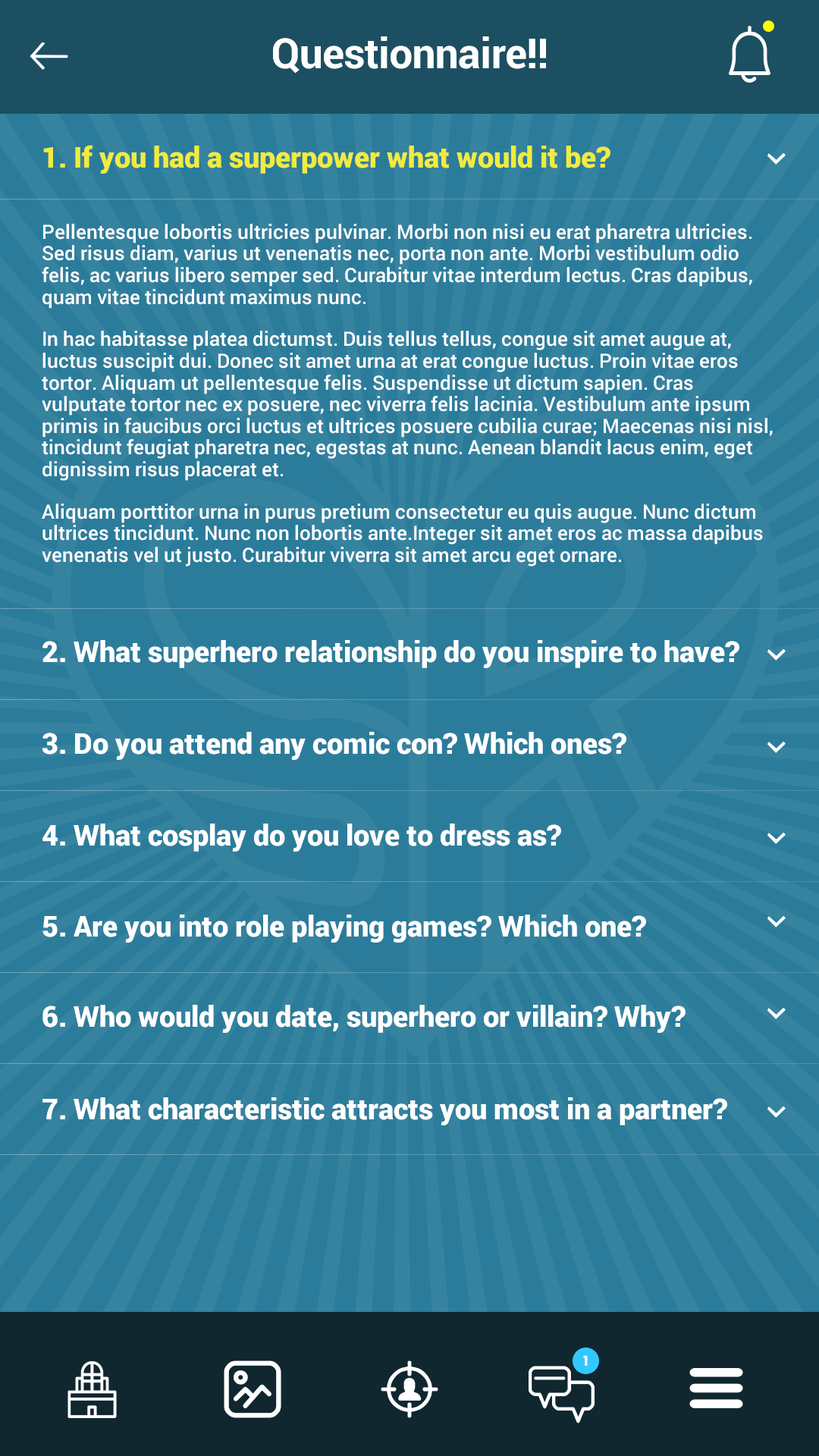
<style>
.page{position:relative;width:819px;height:1456px;background:#2b7c9b}
.page>*{position:absolute;margin:0}
.t1{font:41.7px "Roboto-Bold";letter-spacing:-0.013em;color:#ffffff}
.t2{font:28.8px "Roboto-Black";color:#f1eb40}
.t3{font:19.7px/21.7px "Roboto-Medium";color:#ffffff}
.t4{font:28.8px "Roboto-Black";color:#ffffff}
.t5{font:13.6px "Poppins-Bold";letter-spacing:-0.02em;color:#f6f6f6}
</style>
<div class="page">
<p class="t1" style="left:273px;top:36px;width:273px;height:38px">Questionnaire!!</p>
<p class="t2" style="left:43px;top:145px;width:567px;height:29px">1. If you had a superpower what would it be?</p>
<p class="t3" style="left:42px;top:224px;width:731px;height:342px">Pellentesque lobortis ultricies pulvinar. Morbi non nisi eu erat pharetra ultricies. Sed risus diam, varius ut venenatis nec, porta non ante. Morbi vestibulum odio felis, ac varius libero semper sed. Curabitur vitae interdum lectus. Cras dapibus, quam vitae tincidunt maximus nunc.<br><br><br>In hac habitasse platea dictumst. Duis tellus tellus, congue sit amet augue at, luctus suscipit dui. Donec sit amet urna at erat congue luctus. Proin vitae eros tortor. Aliquam ut pellentesque felis. Suspendisse ut dictum sapien. Cras vulputate tortor nec ex posuere, nec viverra felis lacinia. Vestibulum ante ipsum primis in faucibus orci luctus et ultrices posuere cubilia curae; Maecenas nisi nisl, tincidunt feugiat pharetra nec, egestas at nunc. Aenean blandit lacus enim, eget dignissim risus placerat et. <br><br><br>Aliquam porttitor urna in purus pretium consectetur eu quis augue. Nunc dictum ultrices tincidunt. Nunc non lobortis ante.Integer sit amet eros ac massa dapibus venenatis vel ut justo. Curabitur viverra sit amet arcu eget ornare.</p>
<p class="t4" style="left:42px;top:640px;width:697px;height:28px">2. What superhero relationship do you inspire to have?</p>
<p class="t4" style="left:42px;top:732px;width:584px;height:28px">3. Do you attend any comic con? Which ones?</p>
<p class="t4" style="left:42px;top:824px;width:519px;height:28px">4. What cosplay do you love to dress as?</p>
<p class="t4" style="left:42px;top:915px;width:604px;height:28px">5. Are you into role playing games? Which one?</p>
<p class="t4" style="left:42px;top:1005px;width:644px;height:28px">6. Who would you date, superhero or villain? Why?</p>
<p class="t4" style="left:42px;top:1097px;width:685px;height:28px">7. What characteristic attracts you most in a partner?</p>
<p class="t5" style="left:583px;top:1355px;width:5px;height:11px">1</p>
</div>
